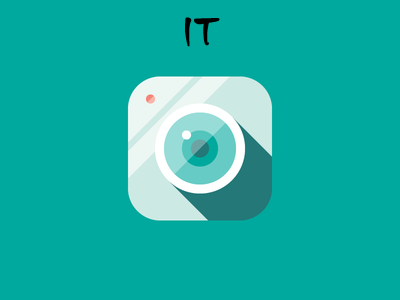
<style>
.page{position:relative;width:400px;height:300px;background:#00a99d}
.page>*{position:absolute;margin:0}
.t1{font:36px "HYr1gj";color:#000000;font-weight:bold}
</style>
<div class="page">
<p class="t1" style="left:185px;top:17px;width:35px;height:30px">IT</p>
</div>
